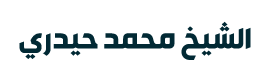
<style>
.page{position:relative;width:270px;height:79px;background:#ffffff}
.page>*{position:absolute;margin:0}
.t1{font:32.6px "STV-Bold";color:#012934}
</style>
<div class="page">
<p class="t1" style="left:19px;top:21px;width:232px;height:39px">الشيخ محمد حيدري</p>
</div>
